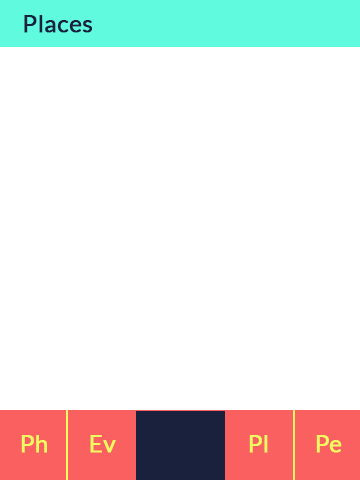
<style>
.page{position:relative;width:360px;height:480px;background:#ffffff}
.page>*{position:absolute;margin:0}
.t1{font:24px "Lato-Regular";color:#18213d;font-weight:bold}
.t2{font:24px "Lato-Regular";color:#f1fa60;font-weight:bold}
</style>
<div class="page">
<p class="t1" style="left:24px;top:15px;width:68px;height:18px">Places</p>
<p class="t2" style="left:21px;top:435px;width:26px;height:18px">Ph</p>
<p class="t2" style="left:90px;top:435px;width:26px;height:18px">Ev</p>
<p class="t2" style="left:249px;top:435px;width:19px;height:18px">Pl</p>
<p class="t2" style="left:316px;top:435px;width:26px;height:18px">Pe</p>
</div>
